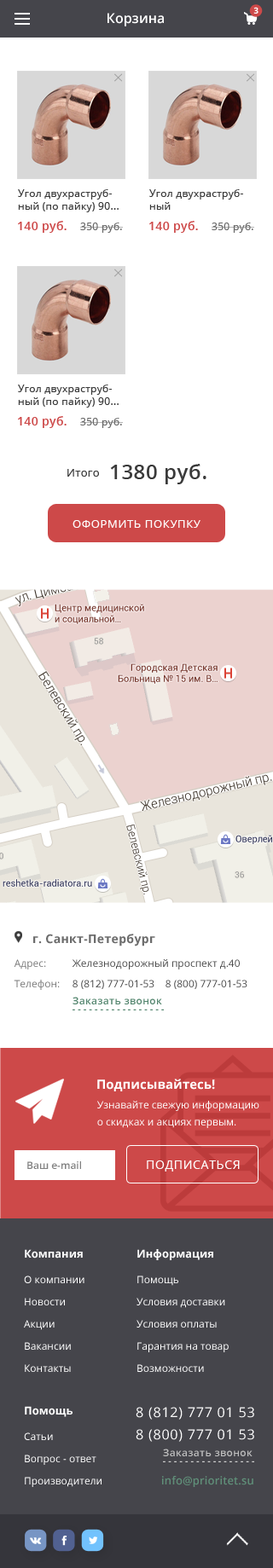
<style>
.page{position:relative;width:273px;height:1568px;background:#ffffff}
.page>*{position:absolute;margin:0}
.t1{font:13.6px "OpenSans-Semibold";color:#ffffff}
.t2{font:8.5px "OpenSans-Bold";letter-spacing:0.025em;color:#ffffff;text-transform:uppercase}
.t3{font:10.2px "OpenSans";letter-spacing:0.025em;color:#3a3a3a}
.t4{font:11.9px "OpenSans-Semibold";letter-spacing:0.025em;color:#cd4949}
.t5{font:10.2px "OpenSans";letter-spacing:0.025em;color:#696969}
.t6{font:11.1px "OpenSans";letter-spacing:0.025em;color:#3a3a3a}
.t7{font:20.5px "OpenSans-Semibold";letter-spacing:0.025em;color:#3a3a3a}
.t8{font:11.1px "OpenSans";letter-spacing:0.05em;color:#ffffff;text-transform:uppercase}
.t9{font:11.9px "OpenSans-Bold";letter-spacing:0.025em;color:#6c6c6c}
.t10{font:10.2px/20.5px "OpenSans";color:#797979}
.t11{font:10.2px/20.5px "OpenSans";color:#4b4b4b}
.t12{font:10.2px/17.1px "OpenSans";color:#4b4b4b}
.t13{font:10.2px "OpenSans-Semibold";letter-spacing:0.025em;color:#54866f}
.t14{font:12.8px "OpenSans-Bold";color:#ffffff}
.t15{font:10.2px/17.1px "OpenSans";color:#ffffff}
.t16{font:10.2px "OpenSans-Semibold";color:#818181}
.t17{font:11.9px "OpenSans";letter-spacing:0.05em;color:#ffffff;text-transform:uppercase}
.t18{font:10.2px/22.2px "OpenSans";color:#ffffff}
.t19{font:11.1px/20.5px "OpenSans-Bold";color:#ffffff}
.t20{font:10.2px/25.6px "OpenSans";color:#ffffff}
.t21{font:13.6px/22.2px "OpenSans";letter-spacing:0.05em;color:#ffffff}
.t22{font:10.2px "OpenSans-Semibold";letter-spacing:0.025em;color:#bfbfbf}
.t23{font:11.1px "OpenSans-Semibold";letter-spacing:0.01em;color:#5f8e78}
</style>
<div class="page">
<p class="t1" style="left:107px;top:13px;width:57px;height:13px">Корзина</p>
<p class="t2" style="left:253px;top:7px;width:5px;height:7px">3</p>
<p class="t3" style="left:18px;top:189px;width:101px;height:23px">Угол двухраструбный (по пайку) 90...</p>
<p class="t3" style="left:149px;top:189px;width:94px;height:21px">Угол двухраструбный</p>
<p class="t4" style="left:18px;top:221px;width:49px;height:12px">140 руб.</p>
<p class="t4" style="left:149px;top:221px;width:49px;height:12px">140 руб.</p>
<p class="t5" style="left:80px;top:223px;width:43px;height:10px">350 руб.</p>
<p class="t5" style="left:211px;top:223px;width:43px;height:10px">350 руб.</p>
<p class="t3" style="left:18px;top:385px;width:101px;height:23px">Угол двухраструбный (по пайку) 90...</p>
<p class="t4" style="left:18px;top:416px;width:49px;height:12px">140 руб.</p>
<p class="t5" style="left:80px;top:418px;width:43px;height:10px">350 руб.</p>
<p class="t6" style="left:67px;top:469px;width:32px;height:8px">Итого</p>
<p class="t7" style="left:110px;top:464px;width:96px;height:20px">1380 руб.</p>
<p class="t8" style="left:72px;top:520px;width:128px;height:8px">оформить покупку</p>
<p class="t9" style="left:33px;top:934px;width:122px;height:12px">г. Санкт-Петербург</p>
<p class="t10" style="left:14px;top:959px;width:46px;height:31px">Адрес:<br>Телефон:</p>
<p class="t11" style="left:72px;top:959px;width:175px;height:30px">Железнодорожный проспект д.40  <br>8 (812) 777-01-53    <span class="t12">8 (800) 777-01-53</span></p>
<p class="t13" style="left:72px;top:997px;width:90px;height:7px">Заказать звонок</p>
<p class="t14" style="left:97px;top:1079px;width:118px;height:12px">Подписывайтесь!</p>
<p class="t15" style="left:97px;top:1101px;width:162px;height:27px">Узнавайте свежую информацию <br>о скидках и акциях первым.</p>
<p class="t16" style="left:27px;top:1161px;width:54px;height:8px">Ваш e-mail</p>
<p class="t17" style="left:147px;top:1160px;width:93px;height:12px">подписаться</p>
<p class="t18" style="left:24px;top:1249px;width:60px;height:123px"><span class="t19">Компания<br></span><span class="t20">О компании<br></span>Новости<br>Акции<br>Вакансии<br>Контакты</p>
<p class="t18" style="left:136px;top:1249px;width:93px;height:123px"><span class="t19">Информация<br></span><span class="t20">Помощь<br></span>Условия доставки<br>Условия оплаты<br>Гарантия на товар<br>Возможности</p>
<p class="t18" style="left:24px;top:1406px;width:77px;height:81px"><span class="t19">Помощь<br></span><span class="t20">Сатьи<br></span>Вопрос - ответ<br>Производители</p>
<p class="t21" style="left:136px;top:1407px;width:118px;height:35px">8 (812) 777 01 53<br>8 (800) 777 01 53</p>
<p class="t22" style="left:163px;top:1449px;width:89px;height:7px">Заказать звонок</p>
<p class="t23" style="left:162px;top:1476px;width:91px;height:11px">info@prioritet.su</p>
</div>
